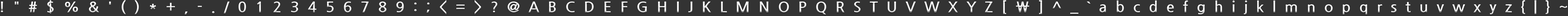
<style>
.page{position:relative;width:1568px;height:16px;background:#333333}
.page>*{position:absolute;margin:0}
.t1{font:15px "NanumGothicBold";color:#ffffff}
</style>
<div class="page">
<p class="t1" style="left:1px;top:0px;width:1566px;height:15px">!  "  #  $  %  &amp;  '  (  )  *  +  ,  -  .  /  0  1  2  3  4  5  6  7  8  9  :  ;  &lt;  =  &gt;  ?  @  A  B  C  D  E  F  G  H  I  J  K  L  M  N  O  P  Q  R  S  T  U  V  W  X  Y  Z  [  \  ]  ^  _  `  a  b  c  d  e  f  g  h  i  j  k  l  m  n  o  p  q  r  s  t  u  v  w  x  y  z  {  |  }  ~</p>
</div>
